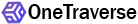
<style>
.page{position:relative;width:138px;height:24px;background:#ffffff}
.page>*{position:absolute;margin:0}
.t1{font:22.3px "FranklinGothic-Medium";color:#000000;scale:0.92 1}
</style>
<div class="page">
<p class="t1" style="left:28px;top:4px;width:109px;height:15px">OneTraverse</p>
</div>
